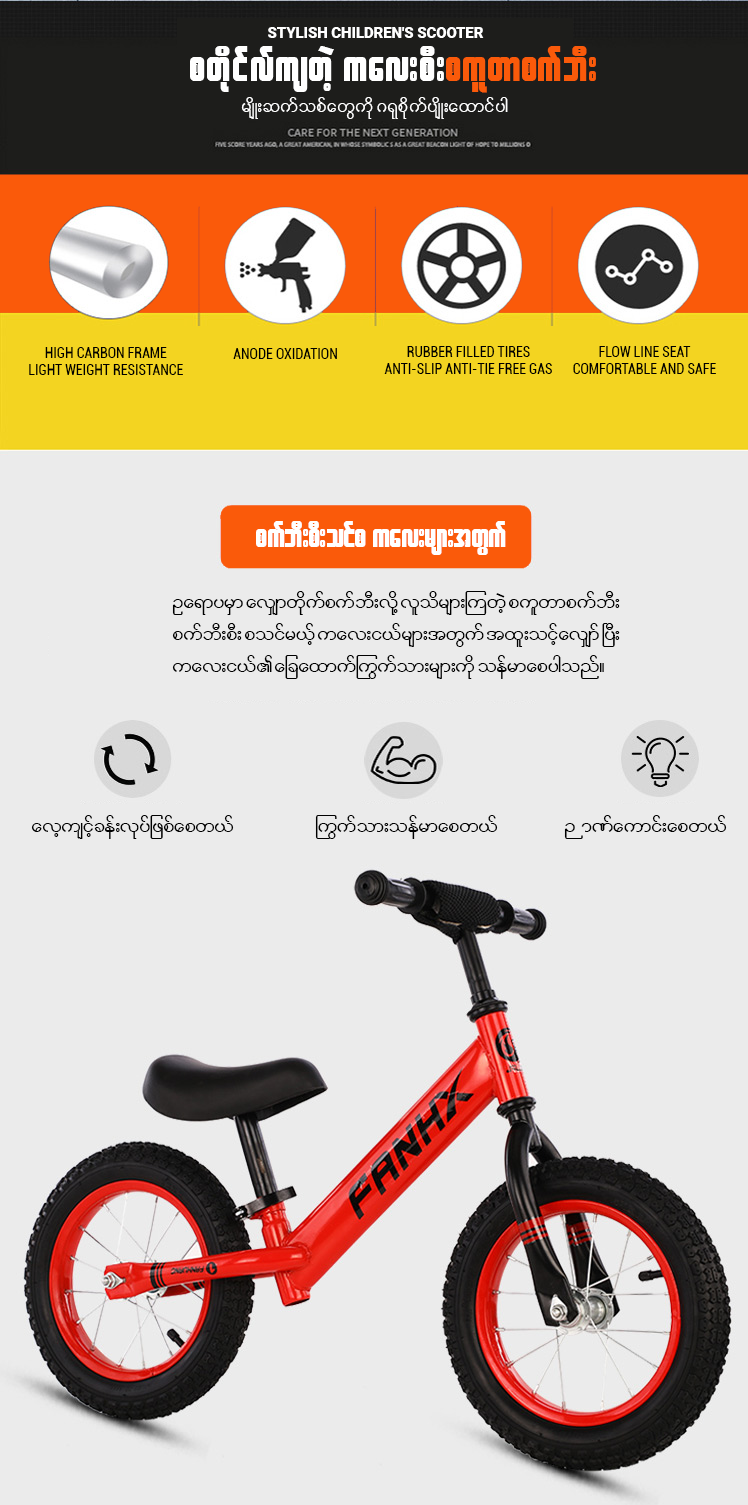
<style>
.page{position:relative;width:748px;height:1505px;background:#ebebeb}
.page>*{position:absolute;margin:0}
.t1{font:14.8px "Roboto-Black";color:#ffffff;text-transform:uppercase}
.t2{font:47.1px "W30ArtHouse";letter-spacing:0.02em;color:#ffffff}
.t3{font:47.1px "W30ArtHouse";letter-spacing:0.02em;color:#fa5a0a}
.t4{font:24px "W01ArtHouseWin";letter-spacing:0.02em;color:#ffffff}
.t5{font:14px "Roboto-Condensed";color:#000000;text-transform:uppercase}
.t6{font:34.7px "W30ArtHouse";color:#ffffff}
.t7{font:26.5px "W01ArtHouseWin";color:#000000}
</style>
<div class="page">
<p class="t1" style="left:268px;top:27px;width:216px;height:11px">Stylish children's scooter</p>
<p class="t2" style="left:190px;top:46px;width:406px;height:47px">pwdkifvfuswJh uav;pD;<span class="t3">pulwmpufbD;</span></p>
<p class="t4" style="left:241px;top:97px;width:267px;height:22px">rsdK;qufopfawGudk *&amp;kpdkufysdK;axmifyg</p>
<p class="t5" style="left:29px;top:347px;width:154px;height:28px;text-align:center">High carbon frame<br>Light weight resistance</p>
<p class="t5" style="left:233px;top:348px;width:104px;height:11px">Anode oxidation</p>
<p class="t5" style="left:384px;top:346px;width:168px;height:28px;text-align:center">Rubber filled tires<br>Anti-slip anti-tie free gas</p>
<p class="t5" style="left:573px;top:346px;width:143px;height:28px;text-align:center">Flow line seat<br>comfortable and safe</p>
<p class="t6" style="left:256px;top:521px;width:250px;height:34px">pufbD;pD;oifp uav;rsm;twGuf</p>
<p class="t7" style="left:172px;top:591px;width:448px;height:88px">Oa&amp;myrSm avQmwdkufpufbD;vdkY vlodrsm;MuwJh pulwmpufbD;<br>pufbD;pD; poifr,fh uav;i,frsm;twGuf txl;oifhavQmf NyD; <br>uav;i,f\ ajcaxmuf~uGufom;rsm;udk oefrmapygonf/</p>
<p class="t7" style="left:31px;top:815px;width:203px;height:24px">avhusifhcef;vkyfjzpfapw,f</p>
<p class="t7" style="left:315px;top:815px;width:183px;height:24px">~uGufom;oefrmapw,f</p>
<p class="t7" style="left:564px;top:815px;width:163px;height:24px">ÚmPfaumif;apw,f</p>
</div>
